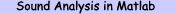
<style>
.page{position:relative;width:176px;height:14px;background:#ccccff}
.page>*{position:absolute;margin:0}
.t1{font:12px "ComicSansMS";color:#000002}
</style>
<div class="page">
<p class="t1" style="left:16px;top:0px;width:139px;height:14px">Sound Analysis in Matlab</p>
</div>
